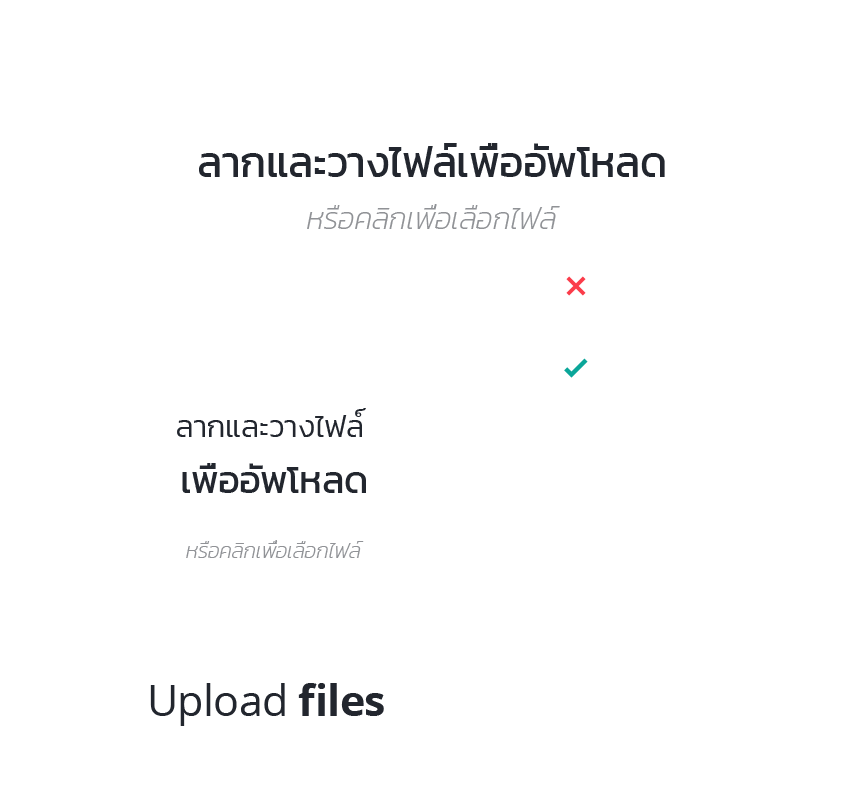
<style>
.page{position:relative;width:856px;height:812px;background:#ffffff}
.page>*{position:absolute;margin:0}
.t1{font:42.6px "Kanit-Regular";letter-spacing:-0.01em;color:#22262e}
.t2{font:30px "Kanit-ExtraLightItalic";letter-spacing:-0.01em;color:#909296}
.t3{font:31px/56.2px "Kanit-Light";letter-spacing:-0.01em;color:#22262e}
.t4{font:42.6px/56.2px "BrowalliaNew";letter-spacing:-0.01em;color:#22262e}
.t5{font:38px/56.2px "Kanit-Regular";letter-spacing:-0.01em;color:#22262e}
.t6{font:21px "Kanit-ExtraLightItalic";letter-spacing:-0.01em;color:#909296}
.t7{font:42.6px "OpenSans";letter-spacing:-0.01em;color:#22262e}
.t8{font:42.6px "OpenSans-Bold";letter-spacing:-0.01em;color:#22262e}
</style>
<div class="page">
<p class="t1" style="left:199px;top:143px;width:466px;height:34px">ลากและวางไฟล์เพื่ออัพโหลด</p>
<p class="t2" style="left:307px;top:204px;width:253px;height:25px">หรือคลิกเพื่อเลือกไฟล์</p>
<p class="t3" style="left:177px;top:408px;width:189px;height:85px;text-align:center">ลากและวางไฟล<span class="t4">์ <br></span><span class="t5">เพื่ออัพโหลด</span></p>
<p class="t6" style="left:186px;top:540px;width:178px;height:18px">หรือคลิกเพื่อเลือกไฟล์</p>
<p class="t7" style="left:150px;top:683px;width:234px;height:43px">Upload<span class="t8"> files</span></p>
</div>
